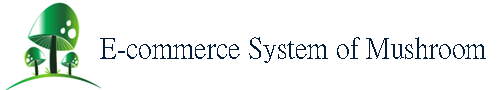
<style>
.page{position:relative;width:500px;height:90px;background:#ffffff}
.page>*{position:absolute;margin:0}
.t1{font:29.2px "PMingLiU-ExtB";color:#051d36}
</style>
<div class="page">
<p class="t1" style="left:100px;top:37px;width:386px;height:26px">E-commerce System of Mushroom</p>
</div>
